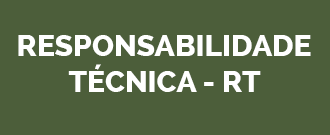
<style>
.page{position:relative;width:330px;height:135px;background:#4c5e3a}
.page>*{position:absolute;margin:0}
.t1{font:30px "Raleway-ExtraBold";color:#ffffff;text-transform:uppercase}
</style>
<div class="page">
<p class="t1" style="left:18px;top:35px;width:293px;height:57px;text-align:center">responsabilidade<br>técnica - rt</p>
</div>
